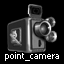
<style>
.page{position:relative;width:64px;height:64px;background:#000000}
.page>*{position:absolute;margin:0}
.t1{font:9px "Tahoma";color:#ffffff}
</style>
<div class="page">
<p class="t1" style="left:5px;top:52px;width:54px;height:9px">point_camera</p>
</div>
